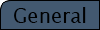
<style>
.page{position:relative;width:100px;height:30px;background:#435970}
.page>*{position:absolute;margin:0}
.t1{font:20px "LucidaSans";color:#000000}
</style>
<div class="page">
<p class="t1" style="left:14px;top:7px;width:72px;height:16px">General</p>
</div>
